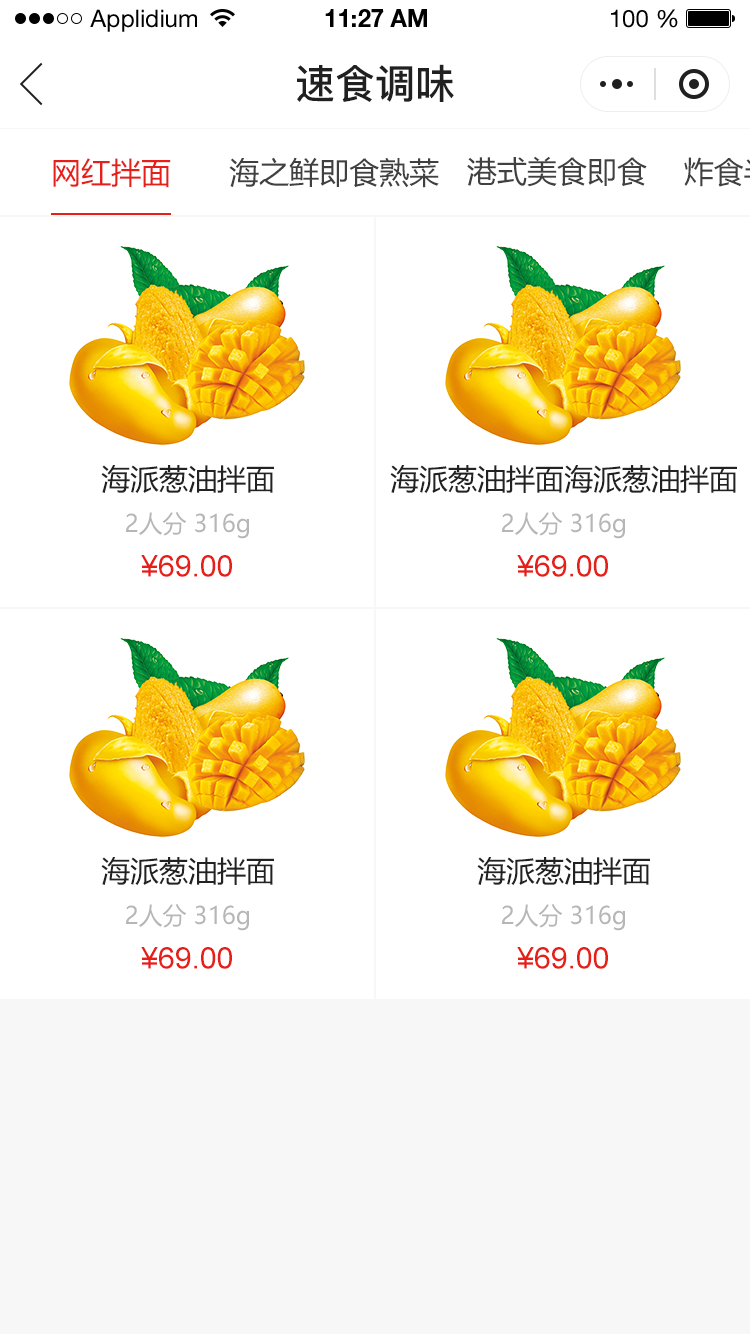
<style>
.page{position:relative;width:750px;height:1334px;background:#ffffff}
.page>*{position:absolute;margin:0}
.t1{font:24px "HelveticaNeueLTStd-Roman";color:#000000}
.t2{font:24px "HelveticaNeueLTStd-Bd";color:#000000}
.t3{font:40px "PingFang-SC-Bold";color:#202020;text-transform:uppercase}
.t4{font:30px "MicrosoftYaHei";color:#e61f18;text-transform:uppercase}
.t5{font:30px "MicrosoftYaHei";color:#404040;text-transform:uppercase}
.t6{font:29px "MicrosoftYaHei";color:#222222;text-transform:uppercase}
.t7{font:24px "MicrosoftYaHei";color:#b6b6b6}
.t8{font:30px "ArialMT";color:#e61f18;text-transform:uppercase}
</style>
<div class="page">
<p class="t1" style="left:90px;top:9px;width:107px;height:23px">Applidium</p>
<p class="t2" style="left:325px;top:9px;width:102px;height:18px">11:27 AM</p>
<p class="t1" style="left:611px;top:9px;width:67px;height:19px">100 %</p>
<p class="t3" style="left:297px;top:64px;width:157px;height:38px">速食调味</p>
<p class="t4" style="left:53px;top:158px;width:118px;height:30px">网红拌面</p>
<p class="t5" style="left:229px;top:157px;width:210px;height:31px">海之鲜即食熟菜</p>
<p class="t5" style="left:467px;top:156px;width:180px;height:31px">港式美食即食</p>
<p class="t6" style="left:101px;top:465px;width:173px;height:29px">海派葱油拌面</p>
<p class="t6" style="left:390px;top:465px;width:347px;height:29px">海派葱油拌面海派葱油拌面</p>
<p class="t7" style="left:126px;top:512px;width:123px;height:27px">2人分 316g</p>
<p class="t7" style="left:502px;top:512px;width:123px;height:27px">2人分 316g</p>
<p class="t8" style="left:141px;top:555px;width:91px;height:22px">¥69.00</p>
<p class="t8" style="left:517px;top:555px;width:91px;height:22px">¥69.00</p>
<p class="t6" style="left:101px;top:857px;width:173px;height:29px">海派葱油拌面</p>
<p class="t6" style="left:477px;top:857px;width:173px;height:29px">海派葱油拌面</p>
<p class="t7" style="left:126px;top:904px;width:123px;height:27px">2人分 316g</p>
<p class="t7" style="left:502px;top:904px;width:123px;height:27px">2人分 316g</p>
<p class="t8" style="left:141px;top:947px;width:91px;height:22px">¥69.00</p>
<p class="t8" style="left:517px;top:947px;width:91px;height:22px">¥69.00</p>
</div>
